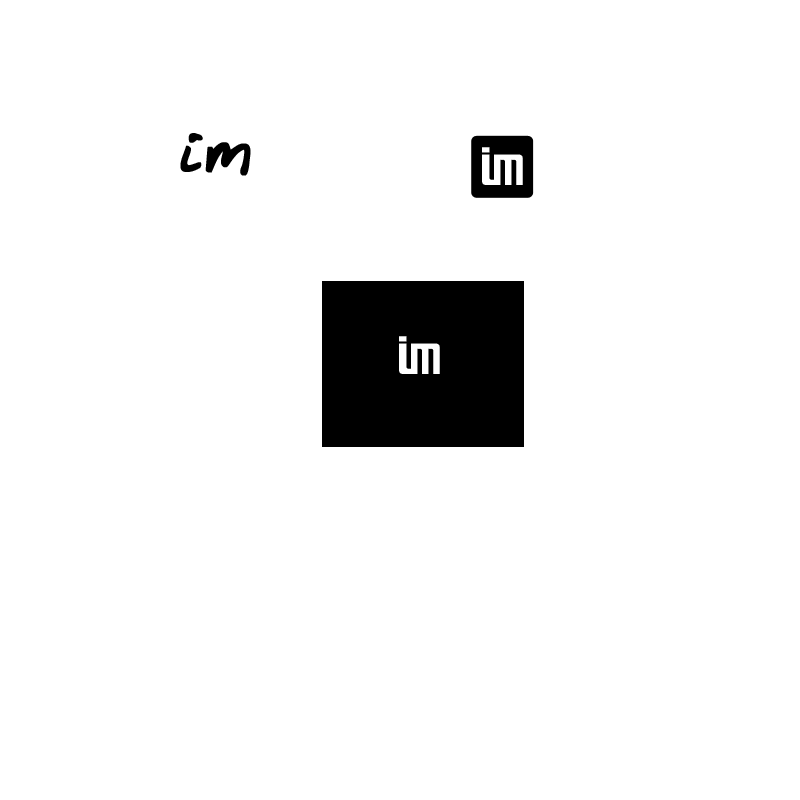
<style>
.page{position:relative;width:800px;height:800px;background:#ffffff}
.page>*{position:absolute;margin:0}
.t1{font:72px "DomesticManners";color:#000000;font-weight:bold}
</style>
<div class="page">
<p class="t1" style="left:180px;top:133px;width:71px;height:43px">im</p>
</div>
